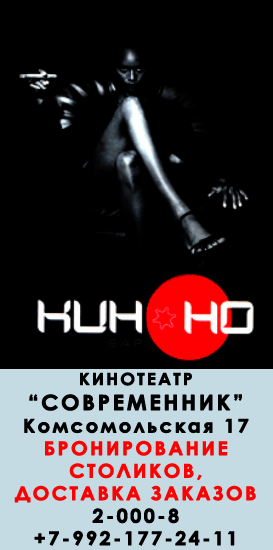
<style>
.page{position:relative;width:273px;height:550px;background:#000000}
.page>*{position:absolute;margin:0}
.t1{font:18.8px "CenturyGothic-Bold";letter-spacing:0.1em;color:#fd0001;font-weight:bold;scale:1.05 1}
.t2{font:16.7px "CenturyGothic-Bold";letter-spacing:0.1em;color:#000000;font-weight:bold;scale:1.05 1}
.t3{font:20.8px "CenturyGothic-Bold";letter-spacing:0.1em;color:#000000;font-weight:bold;scale:1.05 1}
.t4{font:18.8px "CenturyGothic-Bold";letter-spacing:0.1em;color:#000000;font-weight:bold;scale:1.05 1}
</style>
<div class="page">
<p class="t1" style="left:14px;top:372px;width:242px;height:174px;text-align:center"><span class="t2">КИНОТЕАТР<br></span><span class="t3">“СОВРЕМЕННИК”<br></span><span class="t4">Комсомольская 17<br></span>БРОНИРОВАНИЕ<br>СТОЛИКОВ,<br>ДОСТАВКА ЗАКАЗОВ<br><span class="t4">2-000-8<br>+7-992-177-24-11</span></p>
</div>
